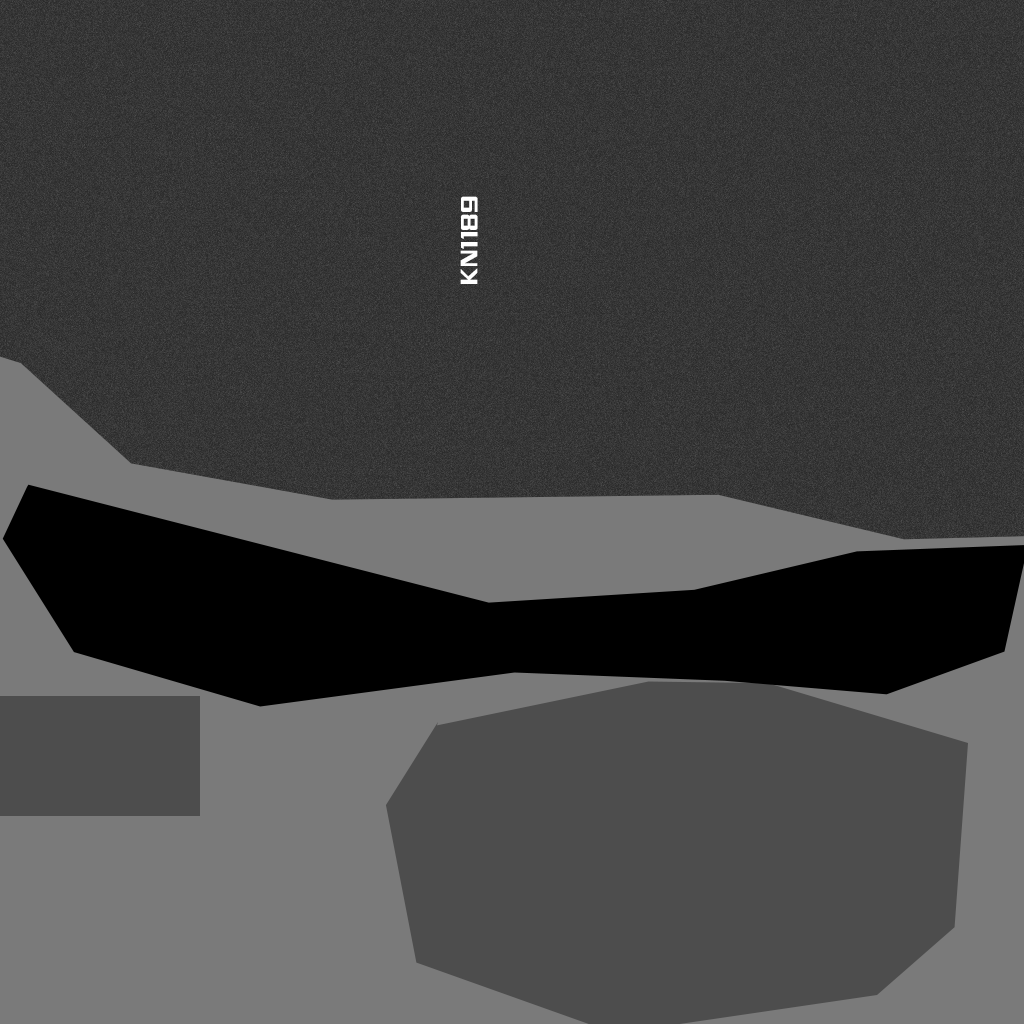
<style>
.page{position:relative;width:1024px;height:1024px;background:#7a7a7a}
.page>*{position:absolute;margin:0}
.t1{font:28.3px "MonkirtaPursuitNC";letter-spacing:-0.015em;color:#fefefe}
</style>
<div class="page">
<p class="t1" style="left:460px;top:196px;width:18px;height:88px;rotate:-90deg">KN1189</p>
<p class="t1" style="left:460px;top:196px;width:18px;height:88px;rotate:-90deg">KN1189</p>
</div>
